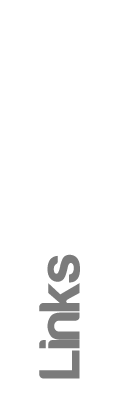
<style>
.page{position:relative;width:120px;height:400px;background:#ffffff}
.page>*{position:absolute;margin:0}
.t1{font:60px "Harabara-Bold";color:#7b7b7b}
</style>
<div class="page">
<p class="t1" style="left:39px;top:254px;width:41px;height:125px;rotate:-90deg">Links</p>
</div>
